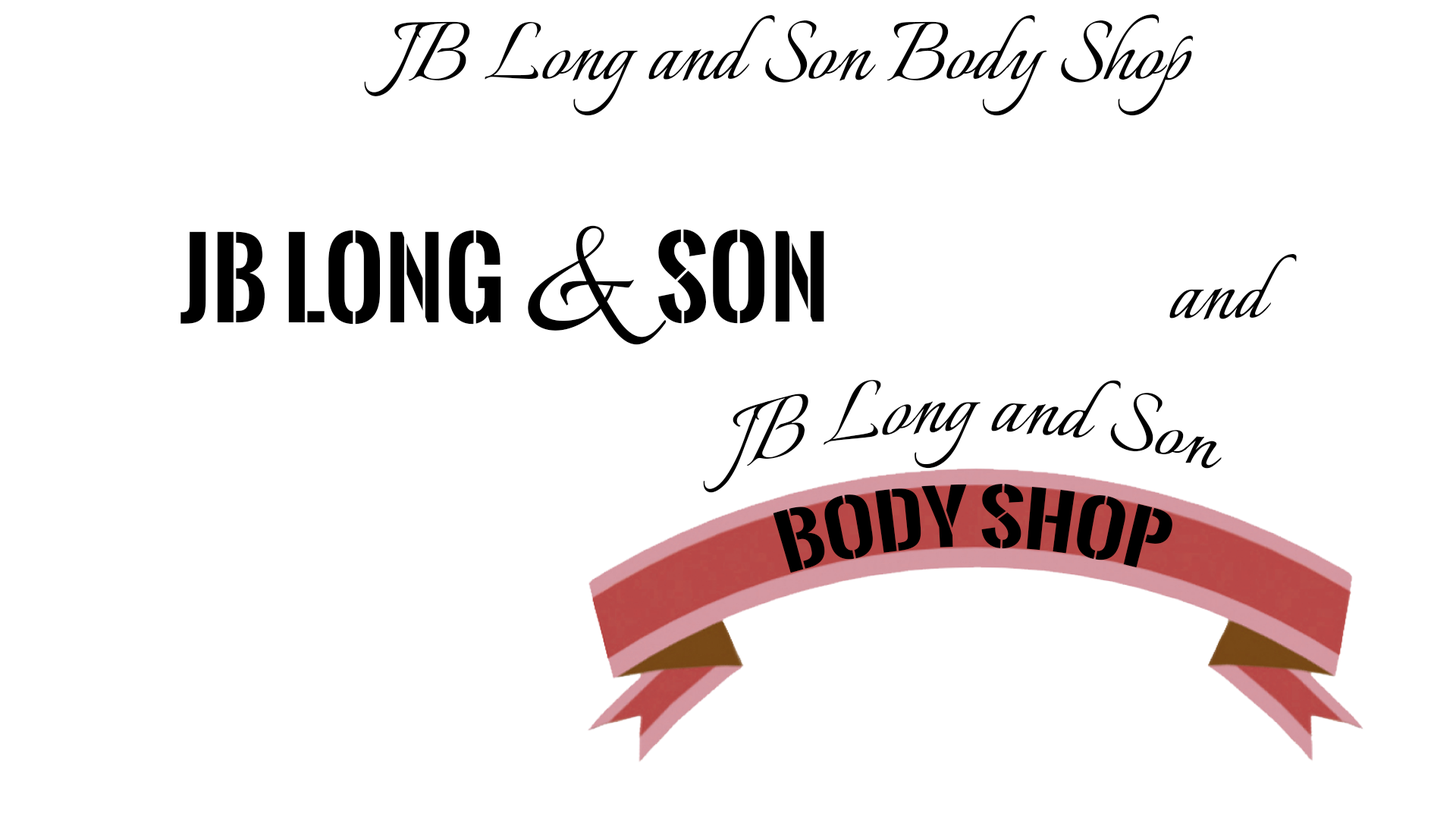
<style>
.page{position:relative;width:1456px;height:819px;background:#ffffff}
.page>*{position:absolute;margin:0}
.t1{font:103.9px "Italianno-Regular";color:#000000}
.t2{font:103.9px "OswaldStencil-Bold";color:#000000}
.t3{font:200.2px "Italianno-Regular";color:#000000}
.t4{font:71.3px "OswaldStencil-Bold";color:#000000}
</style>
<div class="page">
<p class="t1" style="left:364px;top:14px;width:829px;height:102px">JB Long and Son Body Shop</p>
<p class="t2" style="left:180px;top:230px;width:321px;height:95px">JB Long</p>
<p class="t3" style="left:528px;top:225px;width:139px;height:120px">&amp;</p>
<p class="t2" style="left:658px;top:229px;width:166px;height:95px">Son</p>
<p class="t1" style="left:1169px;top:254px;width:128px;height:66px">and</p>
<p class="t1" style="left:703px;top:380px;width:519px;height:113px">JB Long and Son</p>
<p class="t4" style="left:773px;top:484px;width:399px;height:89px">Body Shop</p>
</div>
